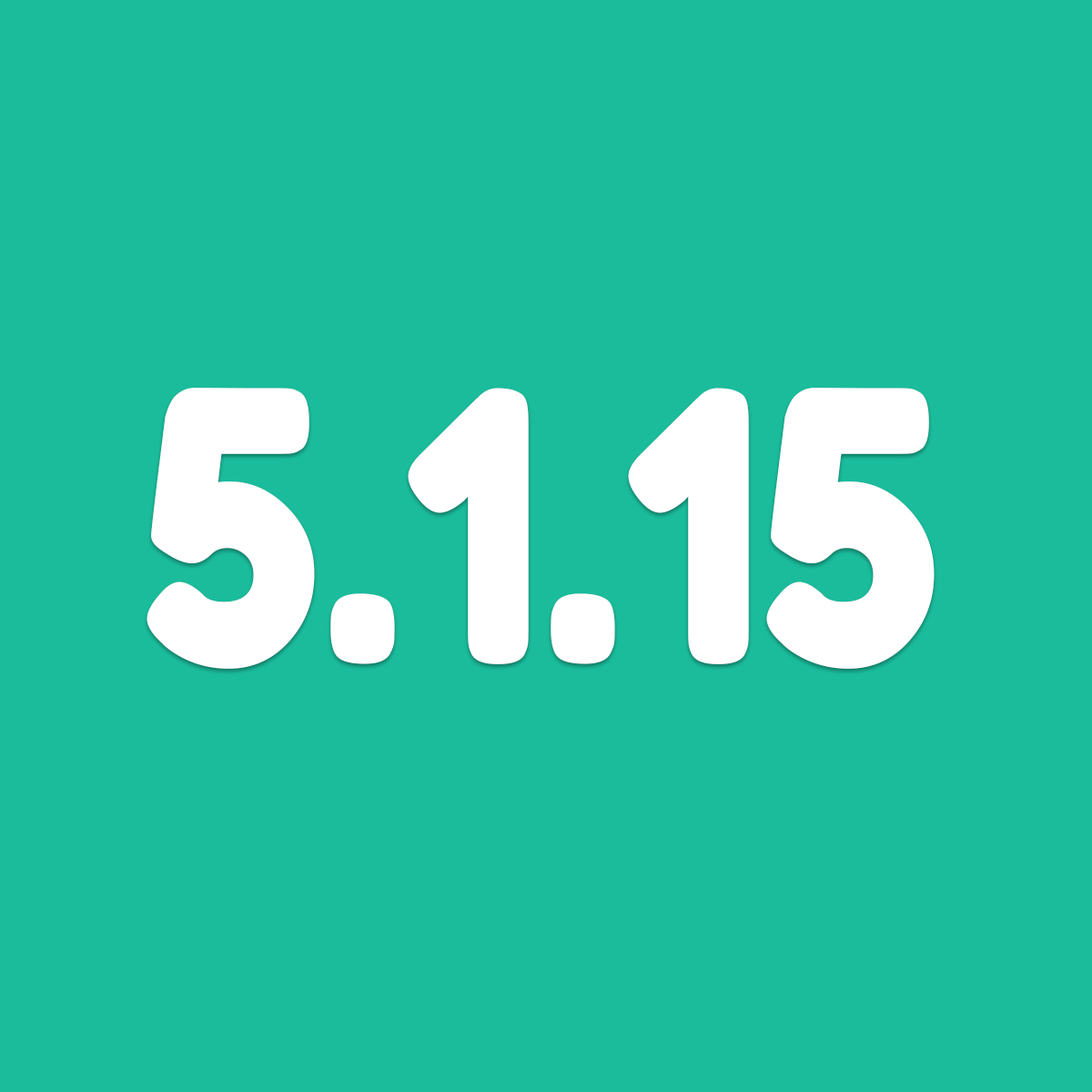
<style>
.page{position:relative;width:1092px;height:1092px;background:#1abc9c}
.page>*{position:absolute;margin:0}
.t1{font:375.3px "FredokaOne-Regular";color:#ffffff;scale:0.91 1}
</style>
<div class="page">
<p class="t1" style="left:147px;top:388px;width:788px;height:281px">5.1.15</p>
</div>
